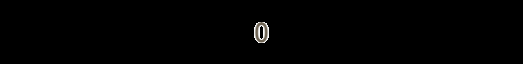
<style>
.page{position:relative;width:523px;height:64px;background:#000000}
.page>*{position:absolute;margin:0}
.t1{font:26px/26px "WebPSD-18463539-0-Regular";color:#6f6555;font-weight:bold}
</style>
<div class="page">
<p class="t1" style="left:0px;top:0px;width:523px;height:64px;text-align:center">0</p>
</div>
